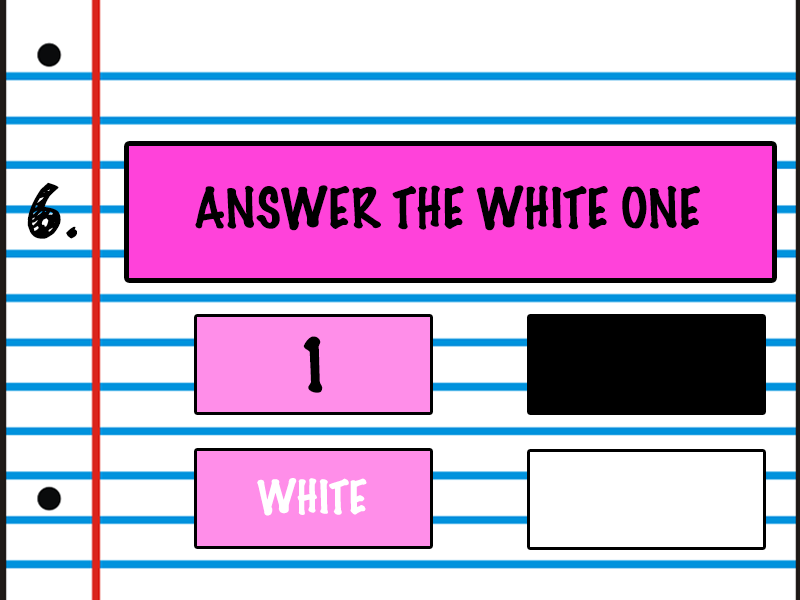
<style>
.page{position:relative;width:800px;height:600px;background:#ffffff}
.page>*{position:absolute;margin:0}
.t1{font:66.7px "Golden-Star";color:#000000}
.t2{font:50px "MarkerFelt-Thin";color:#000000}
.t3{font:66.7px "MarkerFelt-Thin";color:#000000}
.t4{font:41.7px "MarkerFelt-Thin";color:#ffffff}
</style>
<div class="page">
<p class="t1" style="left:27px;top:182px;width:50px;height:57px">6.</p>
<p class="t2" style="left:195px;top:185px;width:505px;height:46px">ANSWER THE WHITE ONE</p>
<p class="t3" style="left:303px;top:336px;width:20px;height:57px">1</p>
<p class="t4" style="left:257px;top:478px;width:110px;height:38px">WHITE</p>
</div>
